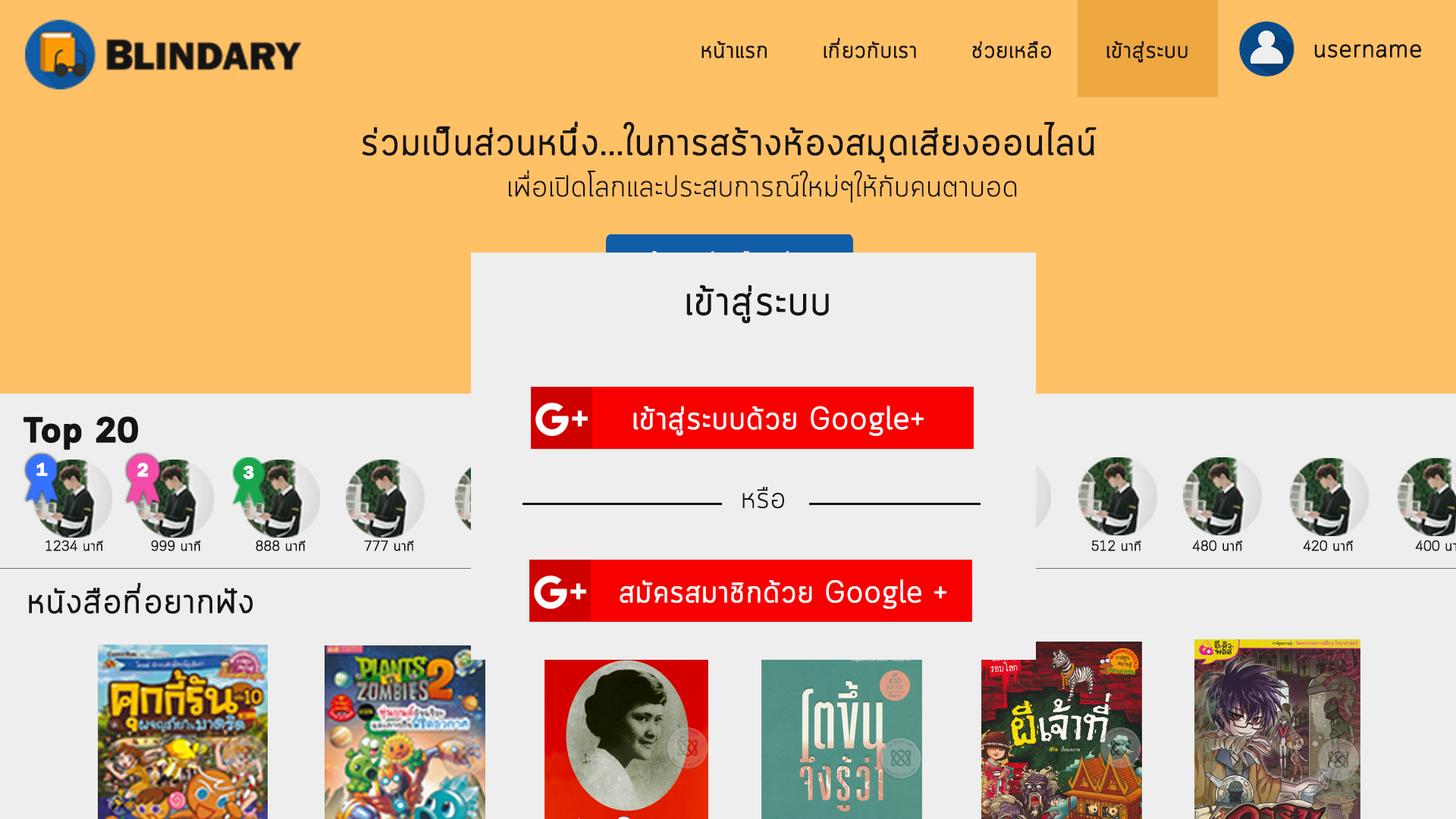
<style>
.page{position:relative;width:1456px;height:819px;background:#ffc066}
.page>*{position:absolute;margin:0}
.t1{font:22.7px "Cloud-Light";color:#141414;font-weight:bold}
.t2{font:24.2px "Cloud-Light";color:#141414;font-weight:bold}
.t3{font:37.9px "Cloud-Light";color:#141414;font-weight:bold}
.t4{font:30.3px "Cloud-Light";color:#141414}
.t5{font:40.5px "Cloud-Light";color:#141414;font-weight:bold}
.t6{font:31.1px "Cloud-Light";color:#fefefe;font-weight:bold}
.t7{font:35.1px "Cloud-Bold";color:#141414;font-weight:bold}
.t8{font:18.5px "FranklinGothic-Demi";color:#fefeff;font-weight:bold}
.t9{font:19.1px "FranklinGothic-Demi";color:#fefeff;font-weight:bold}
.t10{font:29.6px "Cloud-Light";color:#141414}
.t11{font:14.1px "Cloud-Light";color:#141414;font-weight:bold}
.t12{font:30.3px "Cloud-Light";color:#fefefe;font-weight:bold}
.t13{font:34.5px "Cloud-Light";color:#141414;font-weight:bold}
</style>
<div class="page">
<p class="t1" style="left:701px;top:37px;width:487px;height:26px">หน้าแรก       เกี่ยวกับเรา       ช่วยเหลือ     เข้าสู่ระบบ</p>
<p class="t2" style="left:1314px;top:44px;width:107px;height:14px">username</p>
<p class="t3" style="left:362px;top:121px;width:735px;height:42px">ร่วมเป็นส่วนหนึ่ง...ในการสร้างห้องสมุดเสียงออนไลน์</p>
<p class="t4" style="left:509px;top:170px;width:508px;height:32px">เพื่อเปิดโลกและประสบการณ์ใหม่ๆให้กับคนตาบอด</p>
<p class="t5" style="left:686px;top:285px;width:143px;height:39px">เข้าสู่ระบบ</p>
<p class="t6" style="left:633px;top:406px;width:291px;height:30px">เข้าสู่ระบบด้วย Google+</p>
<p class="t7" style="left:24px;top:416px;width:114px;height:34px">Top 20</p>
<p class="t8" style="left:36px;top:463px;width:12px;height:13px">1</p>
<p class="t9" style="left:137px;top:463px;width:12px;height:14px">2</p>
<p class="t8" style="left:243px;top:466px;width:11px;height:13px">3</p>
<p class="t10" style="left:742px;top:487px;width:42px;height:22px">หรือ</p>
<p class="t11" style="left:45px;top:540px;width:58px;height:11px">1234 นาที</p>
<p class="t11" style="left:151px;top:540px;width:50px;height:11px">999 นาที</p>
<p class="t11" style="left:256px;top:540px;width:50px;height:11px">888 นาที</p>
<p class="t12" style="left:620px;top:579px;width:326px;height:30px">สมัครสมาชิกด้วย Google +</p>
<p class="t13" style="left:29px;top:582px;width:224px;height:32px">หนังสือที่อยากฟัง</p>
</div>
